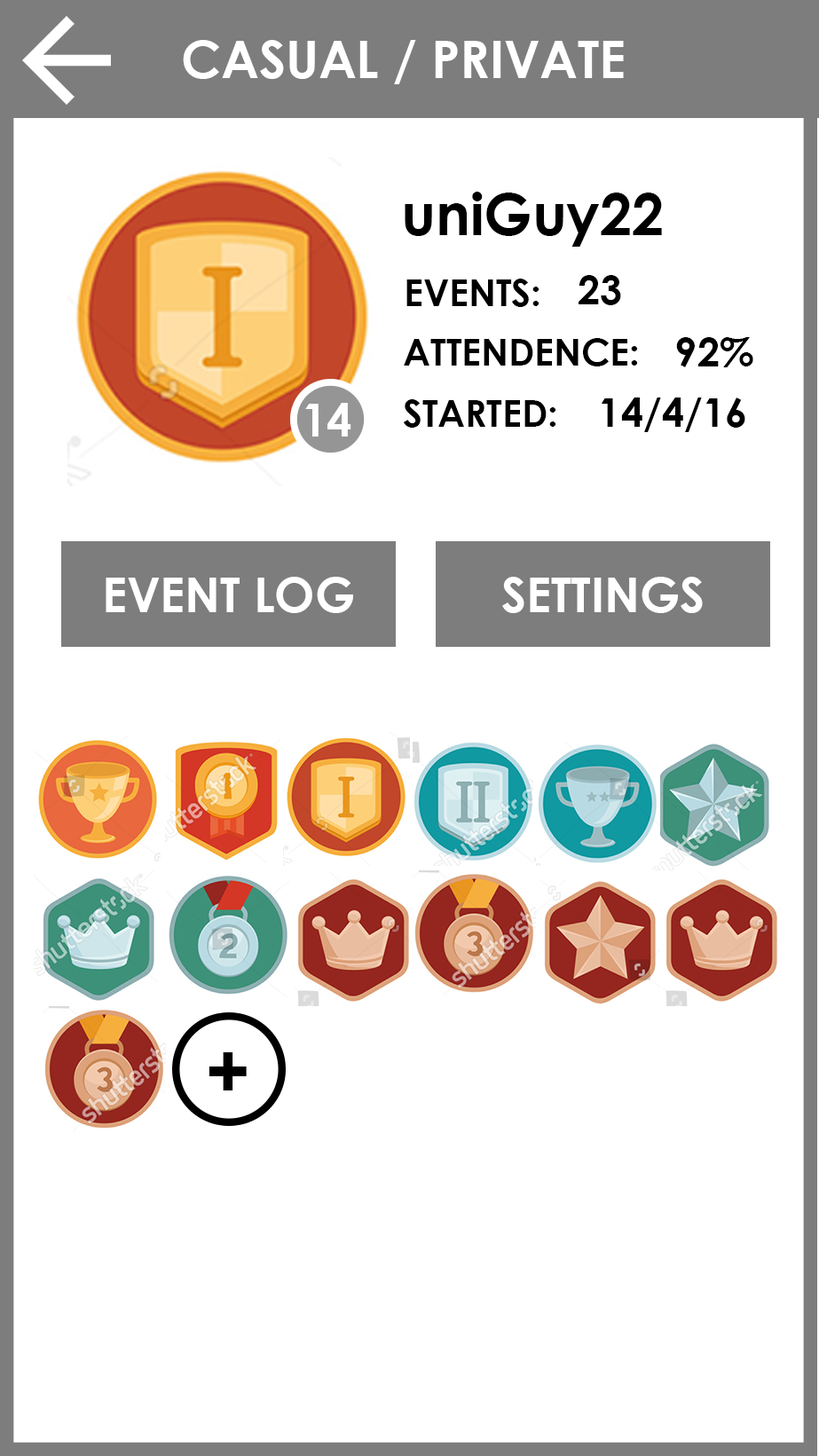
<style>
.page{position:relative;width:819px;height:1456px;background:#ffffff}
.page>*{position:absolute;margin:0}
.t1{font:51.3px "CenturyGothic-Bold";color:#ffffff}
.t2{font:57.5px "CenturyGothic-Bold";color:#000000}
.t3{font:37px "CenturyGothic-Bold";color:#000000}
.t4{font:40.2px "CenturyGothic-Bold";color:#000000}
.t5{font:45.1px "CenturyGothic-Bold";color:#ffffff}
.t6{font:47.6px "CenturyGothic-Bold";color:#ffffff}
.t7{font:76.1px "CenturyGothic-Bold";color:#000000}
</style>
<div class="page">
<p class="t1" style="left:183px;top:40px;width:441px;height:44px">CASUAL / PRIVATE</p>
<p class="t2" style="left:405px;top:192px;width:257px;height:55px">uniGuy22</p>
<p class="t3" style="left:406px;top:279px;width:133px;height:28px">EVENTS:</p>
<p class="t4" style="left:579px;top:275px;width:42px;height:30px">23</p>
<p class="t3" style="left:404px;top:338px;width:234px;height:28px">ATTENDENCE:</p>
<p class="t4" style="left:676px;top:337px;width:77px;height:30px">92%</p>
<p class="t3" style="left:403px;top:399px;width:153px;height:29px">STARTED:</p>
<p class="t4" style="left:602px;top:398px;width:143px;height:34px">14/4/16</p>
<p class="t5" style="left:305px;top:403px;width:46px;height:34px">14</p>
<p class="t6" style="left:106px;top:577px;width:247px;height:36px">EVENT LOG</p>
<p class="t6" style="left:502px;top:577px;width:201px;height:36px">SETTINGS</p>
<p class="t7" style="left:209px;top:1052px;width:38px;height:38px">+</p>
</div>
